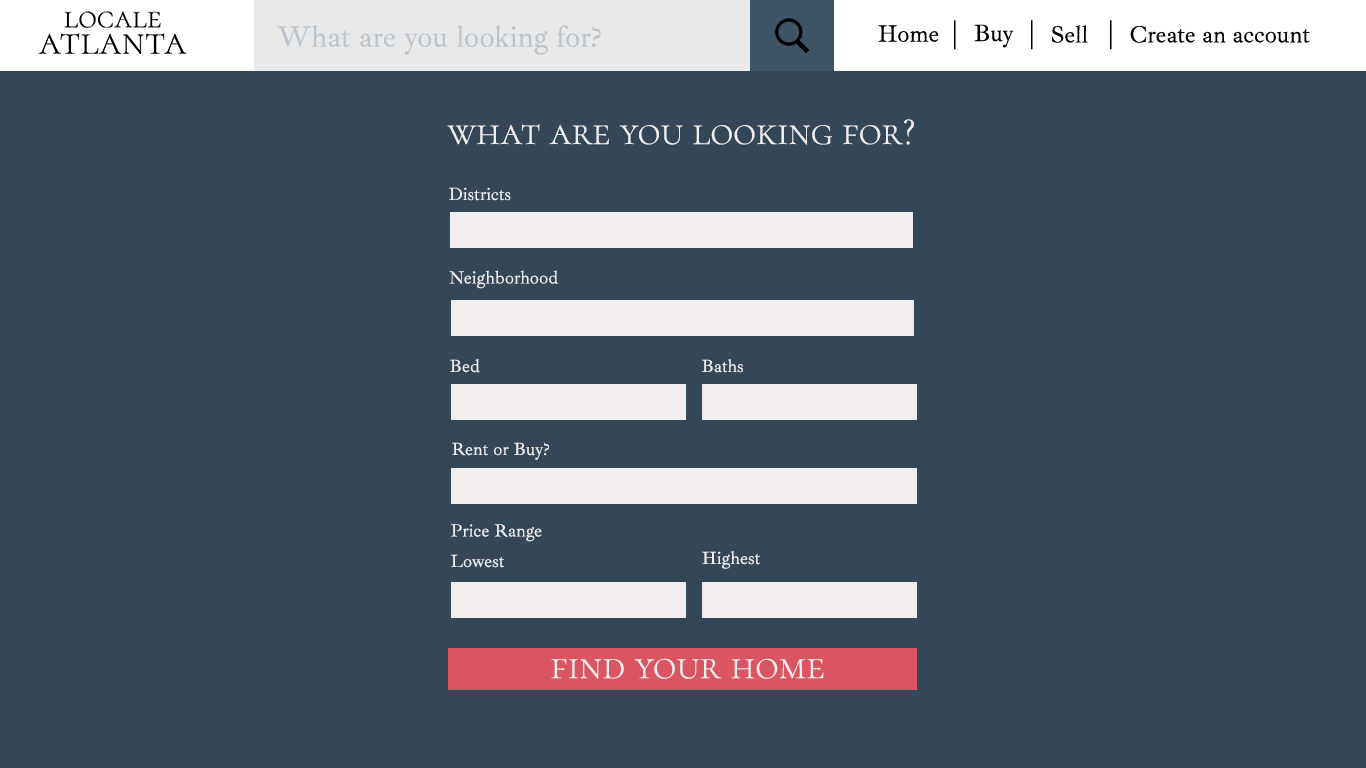
<style>
.page{position:relative;width:1366px;height:768px;background:#334759}
.page>*{position:absolute;margin:0}
.t1{font:39.3px "CormorantSC-Light";color:#f1edee}
.t2{font:18px "IbarraRealNova-Regular";color:#f1edee}
.t3{font:40.2px "CormorantSC-Light";color:#f1edee}
</style>
<div class="page">
<p class="t1" style="left:447px;top:119px;width:467px;height:26px">what are you looking for?</p>
<p class="t2" style="left:449px;top:187px;width:62px;height:14px">Districts</p>
<p class="t2" style="left:449px;top:270px;width:109px;height:19px">Neighborhood</p>
<p class="t2" style="left:450px;top:359px;width:30px;height:14px">Bed</p>
<p class="t2" style="left:702px;top:359px;width:41px;height:14px">Baths</p>
<p class="t2" style="left:452px;top:442px;width:97px;height:18px">Rent or Buy?</p>
<p class="t2" style="left:451px;top:524px;width:91px;height:18px">Price Range</p>
<p class="t2" style="left:451px;top:554px;width:54px;height:14px">Lowest</p>
<p class="t2" style="left:702px;top:551px;width:58px;height:18px">Highest</p>
<p class="t3" style="left:551px;top:658px;width:273px;height:21px">find your home</p>
</div>
